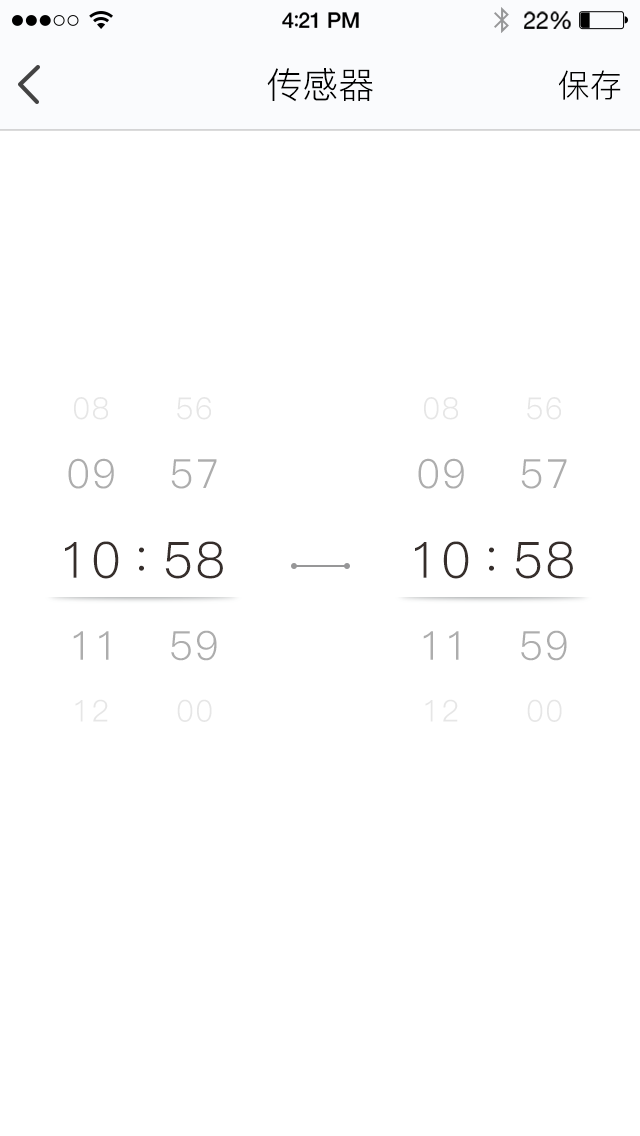
<style>
.page{position:relative;width:640px;height:1136px;background:#ffffff}
.page>*{position:absolute;margin:0}
.t1{font:36px "PingFang-SC-Regular";color:#000000}
.t2{font:32px "PingFang-SC-Regular";color:#000000}
.t3{font:30.1px "PingFang-SC-Regular";letter-spacing:0.04em;color:#e6e6e6;text-transform:uppercase}
.t4{font:40.1px "PingFang-SC-Regular";letter-spacing:0.04em;color:#adadad;text-transform:uppercase}
.t5{font:49.9px "PingFang-SC-Regular";letter-spacing:0.04em;color:#362e2b;text-transform:uppercase}
.t6{font:39.9px "PingFang-SC-Regular";letter-spacing:0.04em;color:#adadad;text-transform:uppercase}
.t7{font:30px "PingFang-SC-Regular";letter-spacing:0.04em;color:#e6e6e6;text-transform:uppercase}
</style>
<div class="page">
<p class="t1" style="left:267px;top:68px;width:106px;height:34px">传感器</p>
<p class="t2" style="left:558px;top:70px;width:63px;height:30px">保存</p>
<p class="t3" style="left:74px;top:397px;width:34px;height:23px">08</p>
<p class="t3" style="left:177px;top:397px;width:34px;height:23px">56</p>
<p class="t3" style="left:424px;top:397px;width:34px;height:23px">08</p>
<p class="t3" style="left:527px;top:397px;width:34px;height:23px">56</p>
<p class="t4" style="left:68px;top:458px;width:46px;height:31px">09</p>
<p class="t4" style="left:171px;top:459px;width:46px;height:30px">57</p>
<p class="t4" style="left:418px;top:458px;width:46px;height:31px">09</p>
<p class="t4" style="left:521px;top:459px;width:46px;height:30px">57</p>
<p class="t5" style="left:65px;top:541px;width:54px;height:38px">10</p>
<p class="t5" style="left:165px;top:541px;width:58px;height:38px">58</p>
<p class="t5" style="left:415px;top:541px;width:54px;height:38px">10</p>
<p class="t5" style="left:515px;top:541px;width:58px;height:38px">58</p>
<p class="t5" style="left:139px;top:547px;width:5px;height:24px">:</p>
<p class="t5" style="left:489px;top:547px;width:5px;height:24px">:</p>
<p class="t6" style="left:171px;top:630px;width:46px;height:31px">59</p>
<p class="t6" style="left:521px;top:630px;width:46px;height:31px">59</p>
<p class="t6" style="left:73px;top:631px;width:36px;height:29px">11</p>
<p class="t6" style="left:423px;top:631px;width:36px;height:29px">11</p>
<p class="t7" style="left:75px;top:699px;width:33px;height:23px">12</p>
<p class="t7" style="left:177px;top:699px;width:35px;height:23px">00</p>
<p class="t7" style="left:425px;top:699px;width:33px;height:23px">12</p>
<p class="t7" style="left:527px;top:699px;width:35px;height:23px">00</p>
</div>
